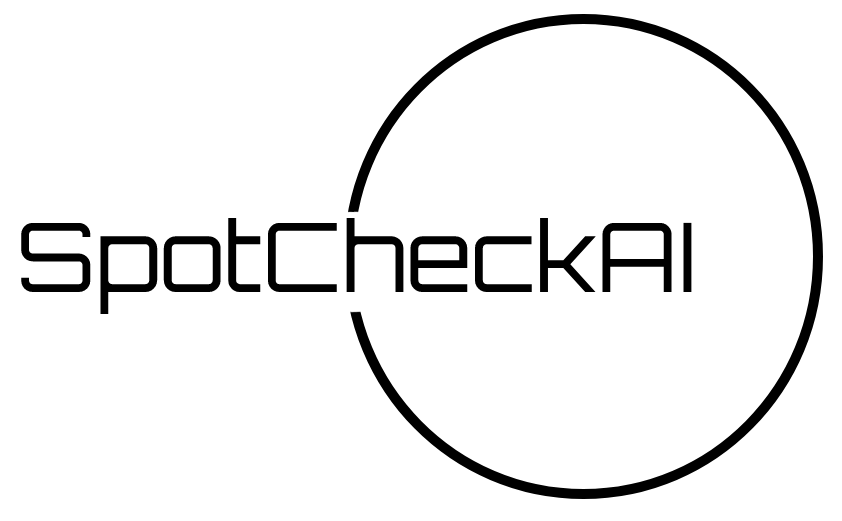
<style>
.page{position:relative;width:842px;height:521px;background:#ffffff}
.page>*{position:absolute;margin:0}
.t1{font:96px "Orbitron-Regular";color:#000000}
</style>
<div class="page">
<p class="t1" style="left:21px;top:218px;width:671px;height:97px">SpotCheckAI</p>
</div>
